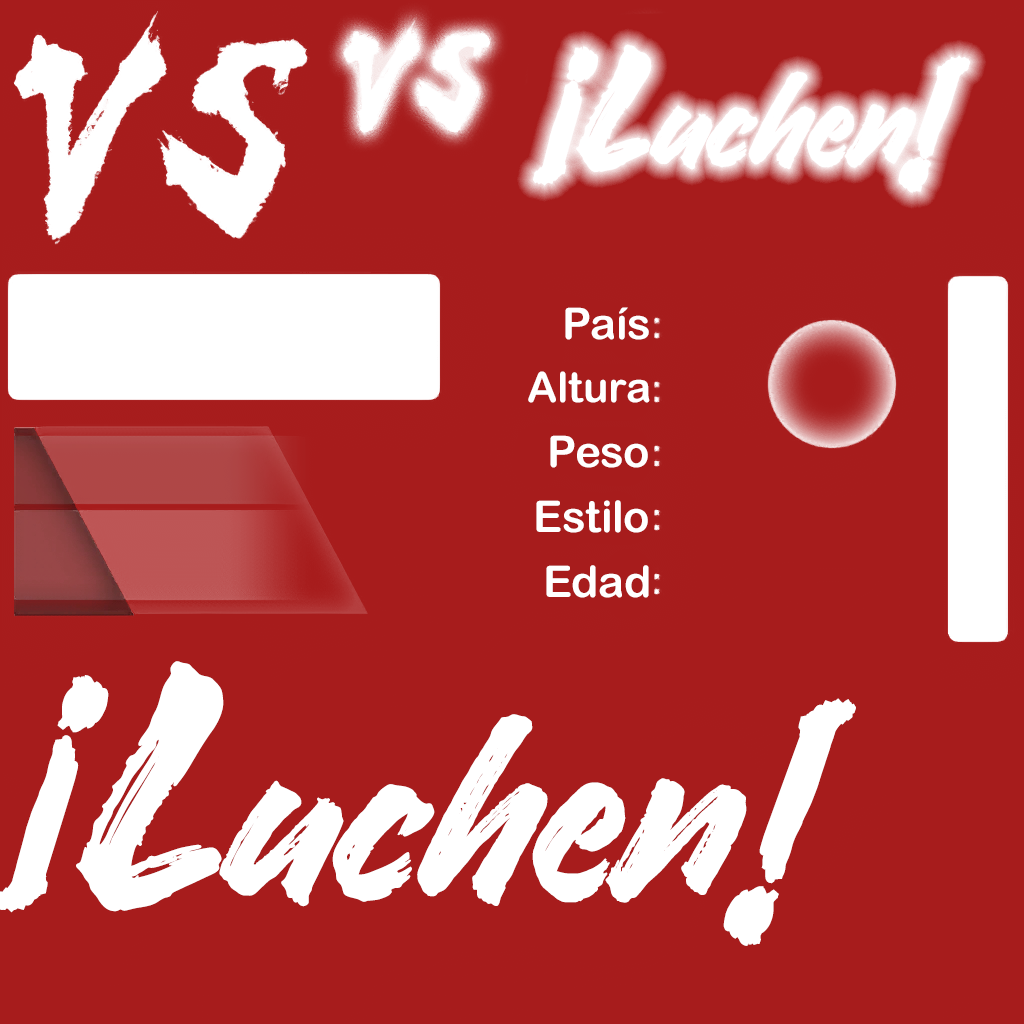
<style>
.page{position:relative;width:1024px;height:1024px;background:#a71c1c}
.page>*{position:absolute;margin:0}
.t1{font:142.6px "DHFStoryBrush";color:#ffffff;font-weight:bold;font-style:italic}
.t2{font:139.3px "Handelson-Two";letter-spacing:-0.04em;color:#ffffff;font-weight:bold;scale:0.93 1}
.t3{font:203.8px "Handelson-Two";letter-spacing:-0.04em;color:#ffffff;font-weight:bold;scale:0.93 1}
.t4{font:43.8px "ArialRoundedMTBold";color:#ffffff}
.t5{font:42px "ArialRoundedMTBold";color:#ffffff}
.t6{font:274.8px "Handelson-Two";letter-spacing:-0.04em;color:#ffffff;font-weight:bold;scale:0.93 1}
.t7{font:402px "Handelson-Two";letter-spacing:-0.04em;color:#ffffff;font-weight:bold;scale:0.93 1}
.t8{font:267.8px "DHFStoryBrush";color:#ffffff;font-weight:bold;font-style:italic}
</style>
<div class="page">
<p class="t1" style="left:533px;top:46px;width:65px;height:140px;rotate:-176deg">!</p>
<p class="t2" style="left:576px;top:44px;width:340px;height:128px"><span class="t3">L</span>uchen</p>
<p class="t1" style="left:898px;top:55px;width:73px;height:138px;rotate:7deg">!</p>
<p class="t4" style="left:565px;top:307px;width:84px;height:33px">País</p>
<p class="t5" style="left:528px;top:371px;width:122px;height:32px">Altura</p>
<p class="t4" style="left:550px;top:435px;width:98px;height:33px">Peso</p>
<p class="t4" style="left:536px;top:500px;width:112px;height:33px">Estilo</p>
<p class="t4" style="left:546px;top:565px;width:103px;height:33px">Edad</p>
<p class="t6" style="left:76px;top:661px;width:671px;height:251px"><span class="t7">L</span>uchen</p>
<p class="t8" style="left:723px;top:698px;width:133px;height:248px;rotate:8deg">!</p>
</div>
